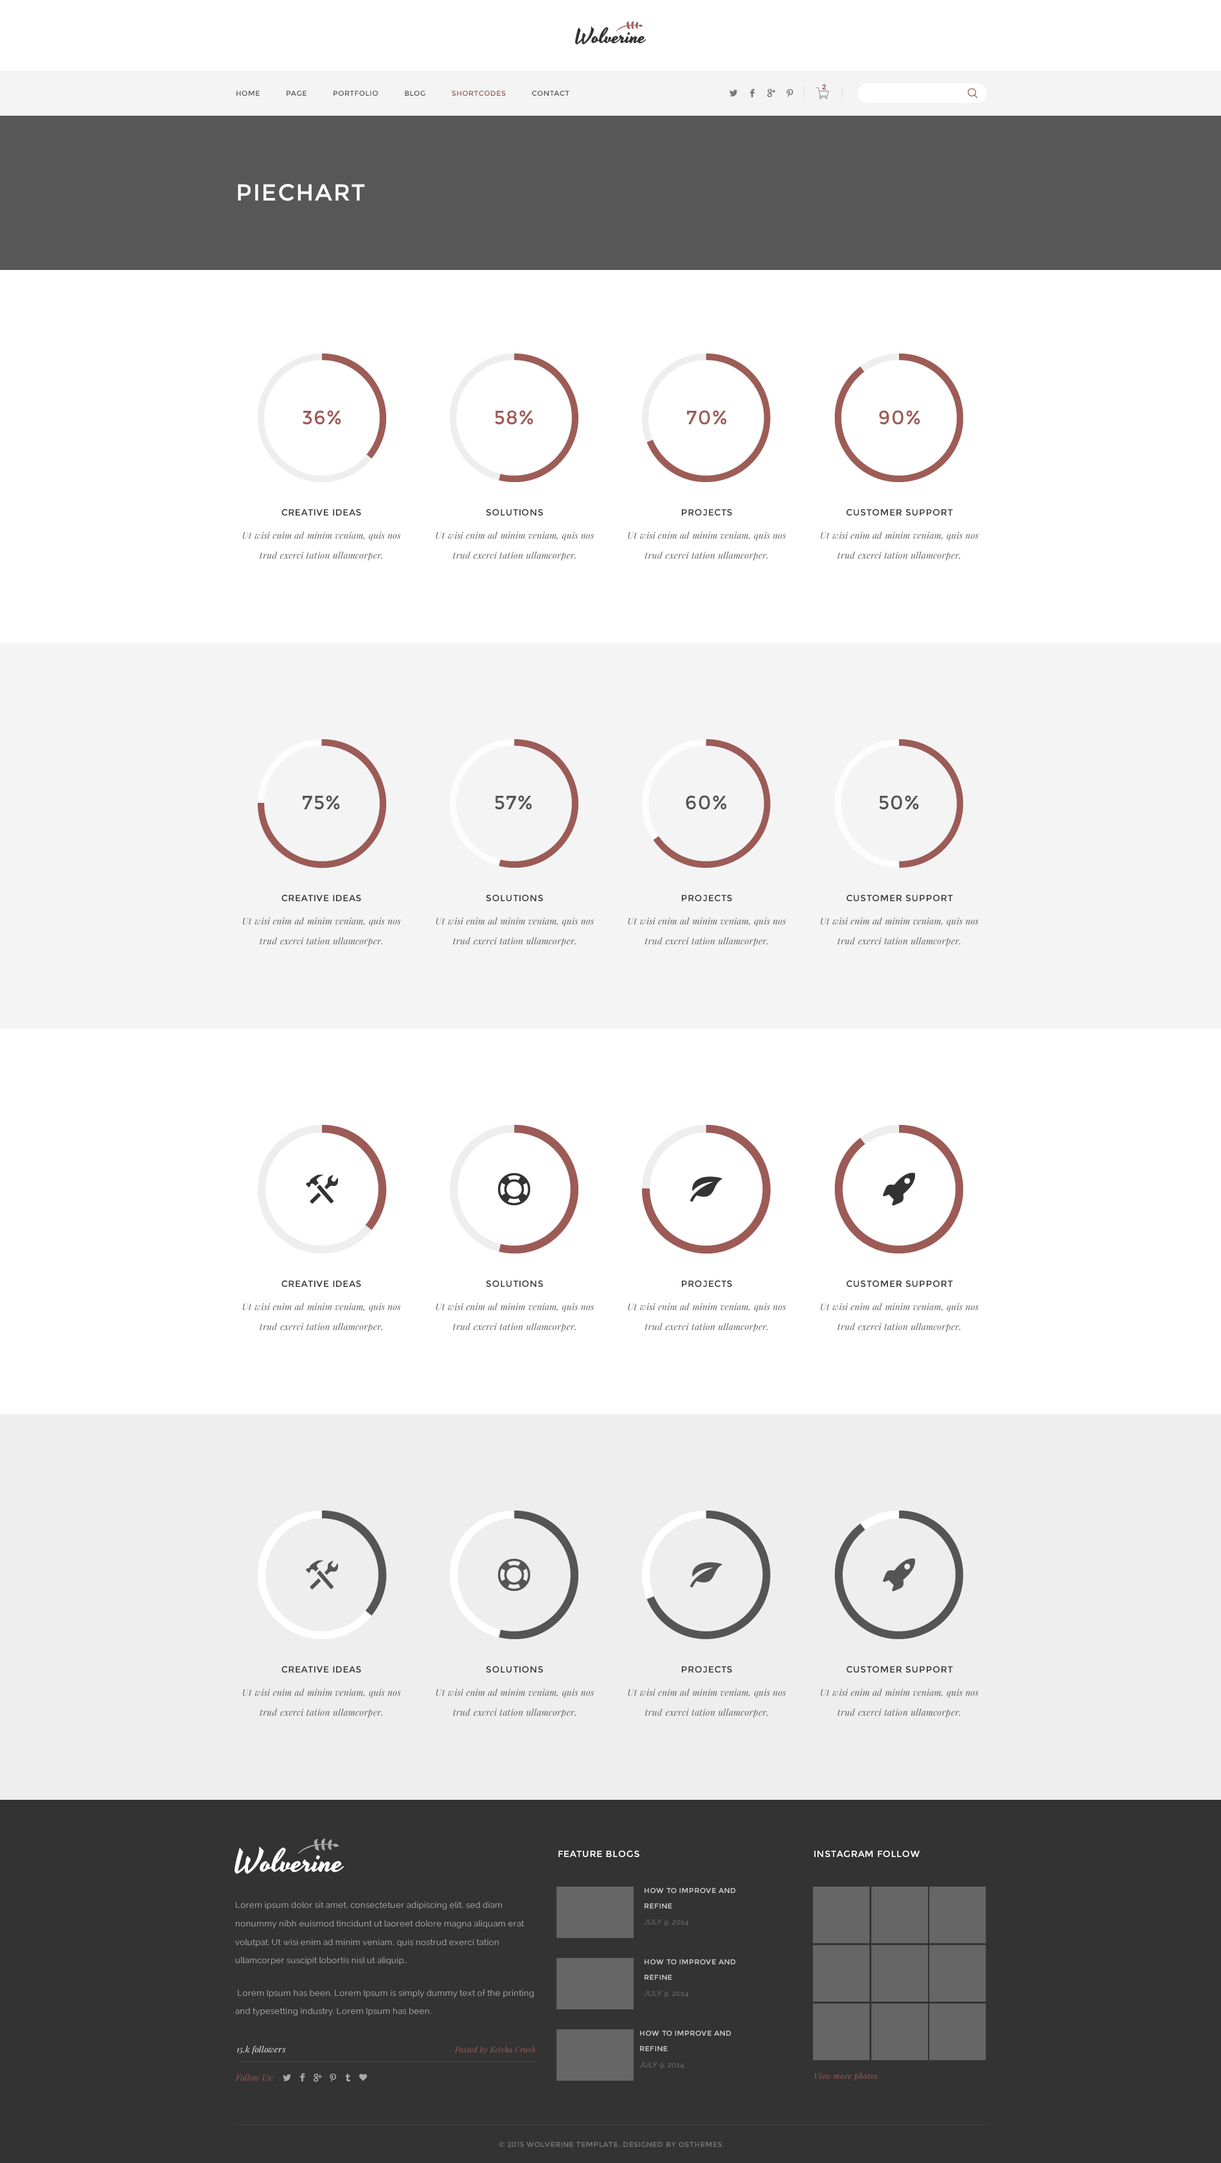
<style>
.page{position:relative;width:1221px;height:2163px;background:#ffffff}
.page>*{position:absolute;margin:0}
.t1{font:7.1px "Montserrat-Regular";color:#9a5a58;font-weight:bold}
.t2{font:7.1px "Montserrat-Regular";letter-spacing:0.05em;color:#535353}
.t3{font:7.1px "Montserrat-Regular";letter-spacing:0.05em;color:#995958}
.t4{font:23.1px "Montserrat-Regular";letter-spacing:0.05em;color:#ffffff}
.t5{font:19.3px "Montserrat-Regular";letter-spacing:0.05em;color:#9e5c56}
.t6{font:9px "Montserrat-Regular";letter-spacing:0.05em;color:#333333}
.t7{font:9px/19.8px "PlayfairDisplay-Italic";letter-spacing:0.02em;color:#555555}
.t8{font:9px/19.8px "PlayfairDisplay-Italic";letter-spacing:0.02em;color:#545454}
.t9{font:19.3px "Montserrat-Regular";letter-spacing:0.05em;color:#555555}
.t10{font:9px "Montserrat-Regular";letter-spacing:0.05em;color:#ffffff}
.t11{font:7.1px/15.6px "Montserrat-Regular";letter-spacing:0.05em;color:#cccccc}
.t12{font:7.1px/15.6px "Raleway-Regular";letter-spacing:0.05em;color:#777777;font-style:italic}
.t13{font:8.4px/18.4px "Raleway-Regular";letter-spacing:0.02em;color:#aaaaaa}
.t14{font:8.4px "PlayfairDisplay-Italic";letter-spacing:0.02em;color:#dddddd}
.t15{font:7.7px "PlayfairDisplay-Italic";letter-spacing:0.02em;color:#9a5a58}
.t16{font:8.4px "PlayfairDisplay-Italic";letter-spacing:0.02em;color:#995958}
.t17{font:7.7px "PlayfairDisplay-Italic";letter-spacing:0.05em;color:#9a5a58}
.t18{font:7.1px "Montserrat-Regular";letter-spacing:0.05em;color:#777777}
</style>
<div class="page">
<p class="t1" style="left:822px;top:84px;width:5px;height:6px">2</p>
<p class="t2" style="left:237px;top:91px;width:333px;height:5px">HOME      PAGE      PORTFOLIO      BLOG      <span class="t3">SHORTCODES</span>      CONTACT</p>
<p class="t4" style="left:238px;top:184px;width:127px;height:17px">PIECHART</p>
<p class="t5" style="left:303px;top:410px;width:38px;height:15px">36%</p>
<p class="t5" style="left:495px;top:410px;width:39px;height:15px">58%</p>
<p class="t5" style="left:687px;top:410px;width:40px;height:15px">70%</p>
<p class="t5" style="left:879px;top:410px;width:42px;height:15px">90%</p>
<p class="t6" style="left:282px;top:509px;width:79px;height:7px">CREATIVE IDEAS</p>
<p class="t6" style="left:486px;top:509px;width:57px;height:7px">SOLUTIONS</p>
<p class="t6" style="left:682px;top:509px;width:50px;height:7px">PROJECTS</p>
<p class="t6" style="left:847px;top:509px;width:106px;height:7px">CUSTOMER SUPPORT</p>
<p class="t7" style="left:243px;top:532px;width:158px;height:29px;text-align:center">Ut wisi enim ad minim veniam, quis nos trud exerci tation ullamcorper.</p>
<p class="t7" style="left:436px;top:532px;width:158px;height:29px;text-align:center">Ut wisi enim ad minim veniam, quis nos trud exerci tation ullamcorper.</p>
<p class="t7" style="left:628px;top:532px;width:158px;height:29px;text-align:center">Ut wisi enim ad minim veniam, quis nos trud exerci tation ullamcorper.</p>
<p class="t8" style="left:821px;top:532px;width:158px;height:29px;text-align:center">Ut wisi enim ad minim veniam, quis nos trud exerci tation ullamcorper.</p>
<p class="t9" style="left:303px;top:795px;width:37px;height:15px">75%</p>
<p class="t9" style="left:495px;top:795px;width:37px;height:15px">57%</p>
<p class="t9" style="left:686px;top:795px;width:41px;height:15px">60%</p>
<p class="t9" style="left:879px;top:795px;width:40px;height:15px">50%</p>
<p class="t6" style="left:282px;top:895px;width:79px;height:6px">CREATIVE IDEAS</p>
<p class="t6" style="left:486px;top:895px;width:57px;height:6px">SOLUTIONS</p>
<p class="t6" style="left:682px;top:895px;width:50px;height:6px">PROJECTS</p>
<p class="t6" style="left:847px;top:895px;width:106px;height:6px">CUSTOMER SUPPORT</p>
<p class="t7" style="left:243px;top:917px;width:158px;height:29px;text-align:center">Ut wisi enim ad minim veniam, quis nos trud exerci tation ullamcorper.</p>
<p class="t7" style="left:436px;top:917px;width:158px;height:29px;text-align:center">Ut wisi enim ad minim veniam, quis nos trud exerci tation ullamcorper.</p>
<p class="t7" style="left:628px;top:917px;width:158px;height:29px;text-align:center">Ut wisi enim ad minim veniam, quis nos trud exerci tation ullamcorper.</p>
<p class="t8" style="left:821px;top:917px;width:158px;height:29px;text-align:center">Ut wisi enim ad minim veniam, quis nos trud exerci tation ullamcorper.</p>
<p class="t6" style="left:282px;top:1281px;width:79px;height:6px">CREATIVE IDEAS</p>
<p class="t6" style="left:486px;top:1281px;width:57px;height:6px">SOLUTIONS</p>
<p class="t6" style="left:682px;top:1281px;width:50px;height:6px">PROJECTS</p>
<p class="t6" style="left:847px;top:1281px;width:106px;height:6px">CUSTOMER SUPPORT</p>
<p class="t8" style="left:243px;top:1303px;width:158px;height:29px;text-align:center">Ut wisi enim ad minim veniam, quis nos trud exerci tation ullamcorper.</p>
<p class="t8" style="left:436px;top:1303px;width:158px;height:29px;text-align:center">Ut wisi enim ad minim veniam, quis nos trud exerci tation ullamcorper.</p>
<p class="t8" style="left:628px;top:1303px;width:158px;height:29px;text-align:center">Ut wisi enim ad minim veniam, quis nos trud exerci tation ullamcorper.</p>
<p class="t8" style="left:821px;top:1303px;width:158px;height:29px;text-align:center">Ut wisi enim ad minim veniam, quis nos trud exerci tation ullamcorper.</p>
<p class="t6" style="left:282px;top:1666px;width:79px;height:7px">CREATIVE IDEAS</p>
<p class="t6" style="left:486px;top:1666px;width:57px;height:7px">SOLUTIONS</p>
<p class="t6" style="left:682px;top:1666px;width:50px;height:7px">PROJECTS</p>
<p class="t6" style="left:847px;top:1666px;width:106px;height:7px">CUSTOMER SUPPORT</p>
<p class="t8" style="left:243px;top:1689px;width:158px;height:29px;text-align:center">Ut wisi enim ad minim veniam, quis nos trud exerci tation ullamcorper.</p>
<p class="t8" style="left:436px;top:1689px;width:158px;height:29px;text-align:center">Ut wisi enim ad minim veniam, quis nos trud exerci tation ullamcorper.</p>
<p class="t8" style="left:628px;top:1689px;width:158px;height:29px;text-align:center">Ut wisi enim ad minim veniam, quis nos trud exerci tation ullamcorper.</p>
<p class="t8" style="left:821px;top:1689px;width:158px;height:29px;text-align:center">Ut wisi enim ad minim veniam, quis nos trud exerci tation ullamcorper.</p>
<p class="t10" style="left:559px;top:1851px;width:81px;height:6px">FEATURE BLOGS</p>
<p class="t10" style="left:815px;top:1851px;width:105px;height:6px">INSTAGRAM FOLLOW</p>
<p class="t11" style="left:644px;top:1888px;width:92px;height:38px">HOW TO IMPROVE AND REFINE <br><span class="t12">JULY 9, 2014</span></p>
<p class="t13" style="left:235px;top:1902px;width:299px;height:114px">Lorem ipsum dolor sit amet, consectetuer adipiscing elit, sed diam nonummy nibh euismod tincidunt ut laoreet dolore magna aliquam erat volutpat. Ut wisi enim ad minim veniam, quis nostrud exerci tation ullamcorper suscipit lobortis nisl ut aliquip..<br> <br> Lorem Ipsum has been. Lorem Ipsum is simply dummy text of the printing and typesetting industry. Lorem Ipsum has been.</p>
<p class="t11" style="left:644px;top:1959px;width:92px;height:38px">HOW TO IMPROVE AND REFINE <br><span class="t12">JULY 9, 2014</span></p>
<p class="t11" style="left:640px;top:2031px;width:92px;height:38px">HOW TO IMPROVE AND REFINE <br><span class="t12">JULY 9, 2014</span></p>
<p class="t14" style="left:237px;top:2046px;width:49px;height:9px">15.k followers</p>
<p class="t15" style="left:455px;top:2046px;width:81px;height:9px">Posted by Keisha Crush</p>
<p class="t16" style="left:235px;top:2074px;width:39px;height:8px">Follow Us:</p>
<p class="t17" style="left:815px;top:2073px;width:63px;height:8px">View more photos</p>
<p class="t18" style="left:499px;top:2142px;width:224px;height:6px">© 2015 WOLVERINE TEMPLATE. DESIGNED BY OSTHEMES</p>
</div>
